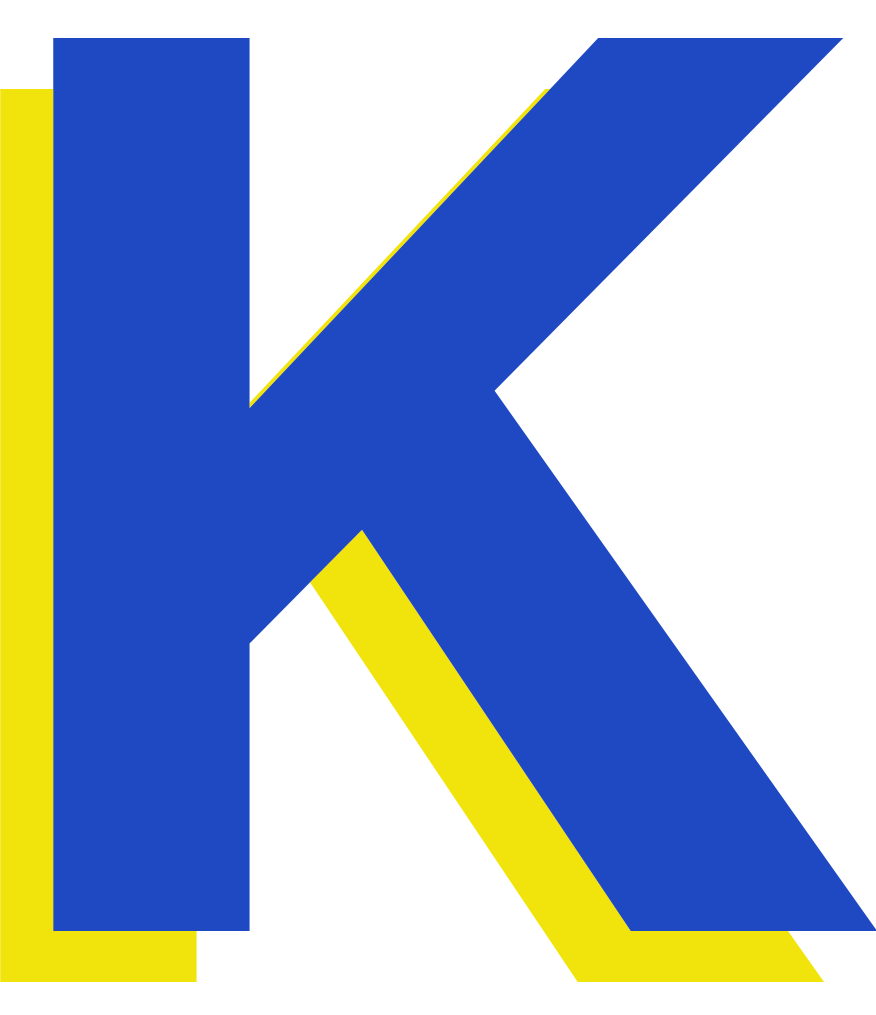
<style>
.page{position:relative;width:876px;height:1015px;background:#1e49c3}
.page>*{position:absolute;margin:0}
.t1{font:1250px "HelveticaNeue-Bold";letter-spacing:0.01em;color:#1e49c3}
</style>
<div class="page">
<p class="t1" style="left:53px;top:38px;width:824px;height:893px">K</p>
<p class="t1" style="left:0px;top:89px;width:824px;height:893px">K</p>
</div>
